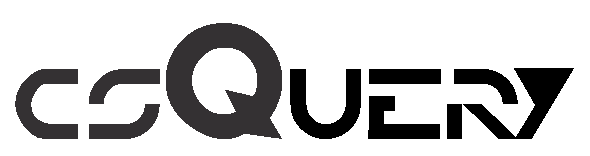
<style>
.page{position:relative;width:590px;height:156px;background:#ffffff}
.page>*{position:absolute;margin:0}
.t1{font:120px "TRON";color:#343133}
.t2{font:72px "TRON";color:#343133}
.t3{font:72px "TRON";color:#000000}
</style>
<div class="page">
<p class="t1" style="left:166px;top:23px;width:116px;height:116px">Q</p>
<p class="t2" style="left:15px;top:69px;width:145px;height:70px">CS</p>
<p class="t3" style="left:290px;top:69px;width:228px;height:70px">uer</p>
<p class="t3" style="left:514px;top:68px;width:60px;height:71px">y</p>
</div>
